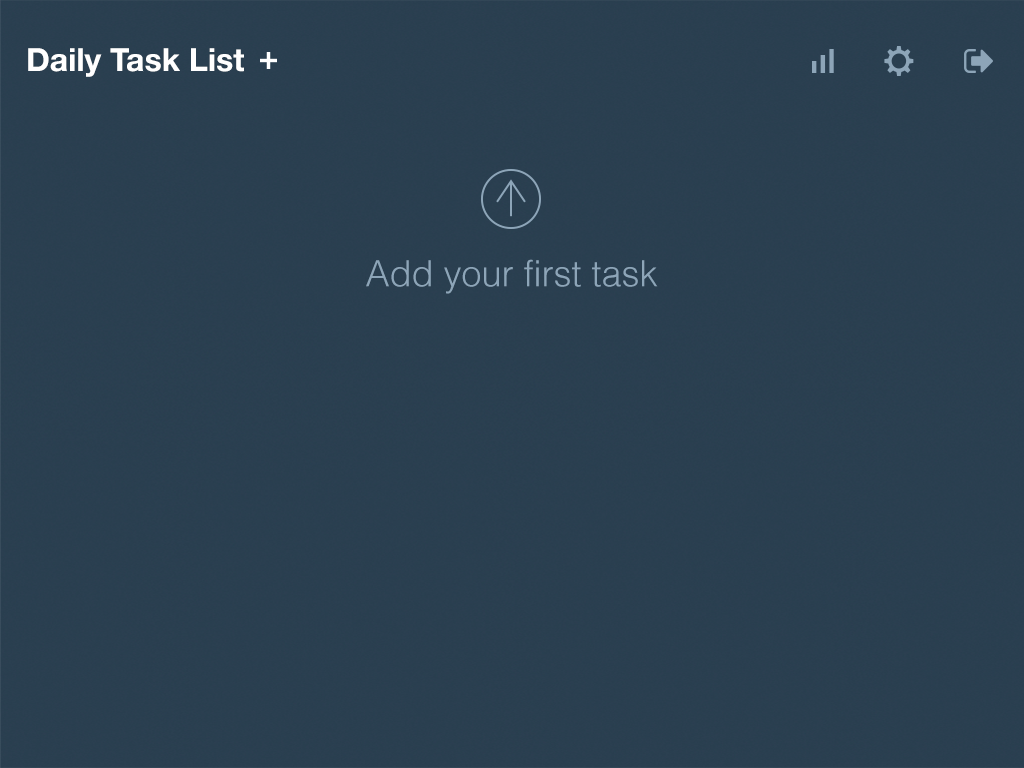
<style>
.page{position:relative;width:1024px;height:768px;background:#2a3f50}
.page>*{position:absolute;margin:0}
.t1{font:32px "HelveticaNeue-Bold";color:#ffffff}
.t2{font:36px "Helvetica-Light";color:#8da5b8}
</style>
<div class="page">
<p class="t1" style="left:28px;top:48px;width:216px;height:29px">Daily Task List</p>
<p class="t2" style="left:366px;top:259px;width:292px;height:35px">Add your first task</p>
</div>
